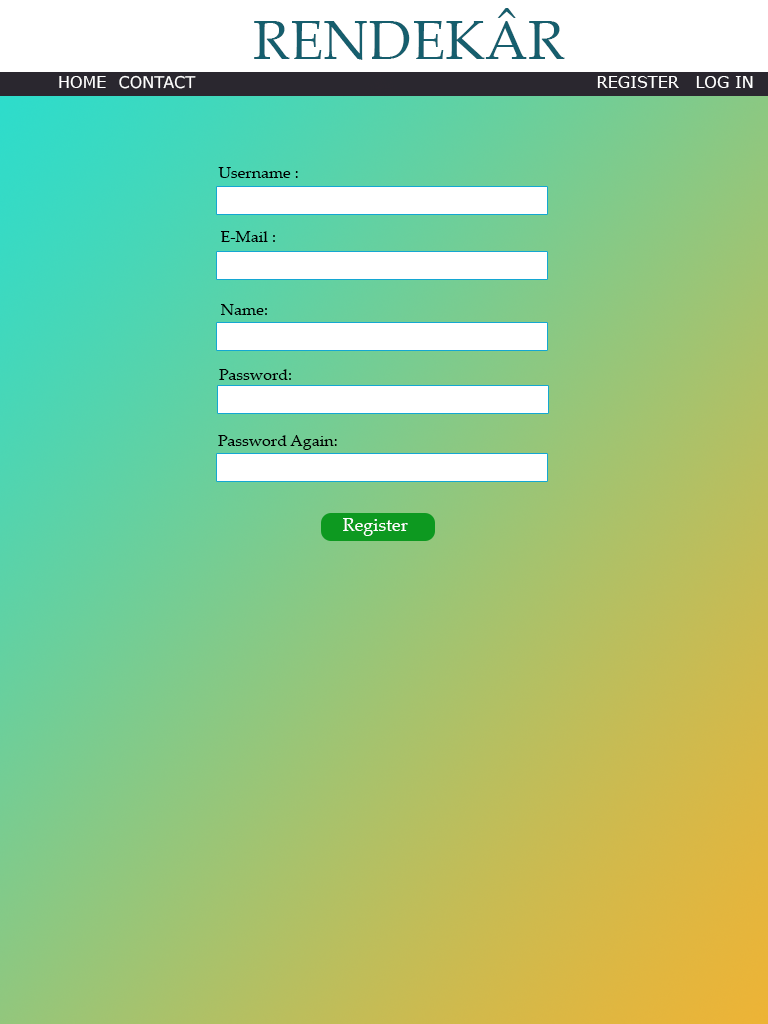
<style>
.page{position:relative;width:768px;height:1024px}
.page>*{position:absolute;margin:0}
.t1{font:55px "PalatinoLinotype-Roman";color:#165e6d}
.t2{font:16px "Verdana";color:#ffffff}
.t3{font:16px "PalatinoLinotype-Roman";color:#000000}
.t4{font:18px "PalatinoLinotype-Roman";color:#ffffff}
</style>
<div class="page">
<p class="t1" style="left:254px;top:8px;width:311px;height:52px">RENDEKÂR</p>
<p class="t2" style="left:59px;top:76px;width:47px;height:12px">HOME</p>
<p class="t2" style="left:119px;top:75px;width:77px;height:14px">CONTACT</p>
<p class="t2" style="left:597px;top:76px;width:82px;height:12px">REGISTER</p>
<p class="t2" style="left:696px;top:76px;width:57px;height:12px">LOG IN</p>
<p class="t3" style="left:218px;top:167px;width:80px;height:11px">Username :</p>
<p class="t3" style="left:221px;top:231px;width:54px;height:11px">E-Mail :</p>
<p class="t3" style="left:221px;top:304px;width:46px;height:11px">Name:</p>
<p class="t3" style="left:219px;top:369px;width:72px;height:11px">Password:</p>
<p class="t3" style="left:218px;top:435px;width:119px;height:15px">Password Again:</p>
<p class="t4" style="left:343px;top:518px;width:65px;height:18px">Register</p>
</div>
